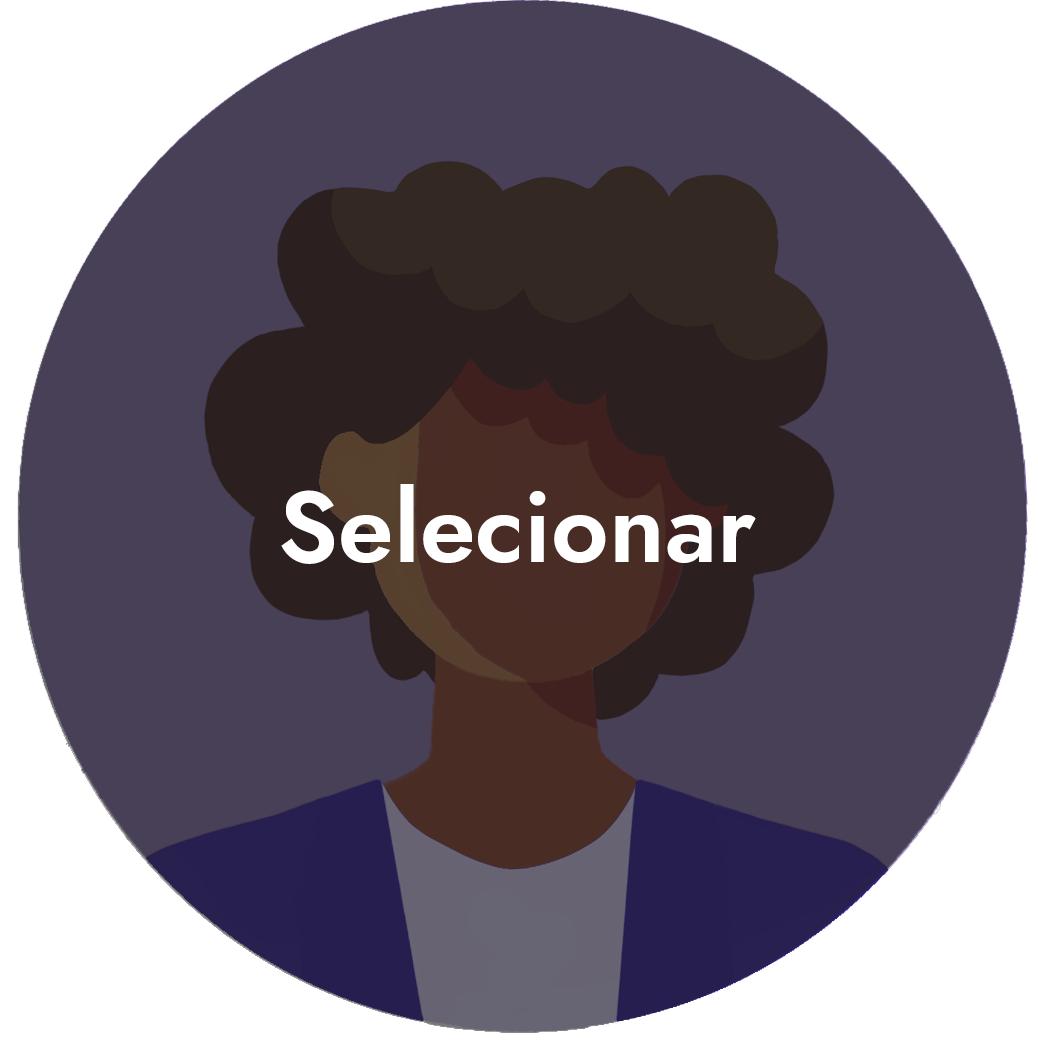
<style>
.page{position:relative;width:1038px;height:1049px;background:#484057}
.page>*{position:absolute;margin:0}
.t1{font:100px "Jost-SemiBold";color:#ffffff}
</style>
<div class="page">
<p class="t1" style="left:281px;top:484px;width:475px;height:80px">Selecionar</p>
</div>
